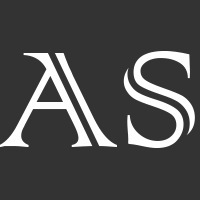
<style>
.page{position:relative;width:200px;height:200px;background:#333333}
.page>*{position:absolute;margin:0}
.t1{font:179.7px "ColonnaMT";color:#ffffff}
</style>
<div class="page">
<p class="t1" style="left:0px;top:51px;width:195px;height:97px">AS</p>
</div>
